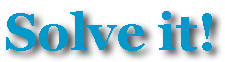
<style>
.page{position:relative;width:225px;height:62px;background:#ffffff}
.page>*{position:absolute;margin:0}
.t1{font:51.1px "Georgia-Bold";color:#0099cc}
</style>
<div class="page">
<p class="t1" style="left:6px;top:11px;width:206px;height:40px">Solve it!</p>
</div>
